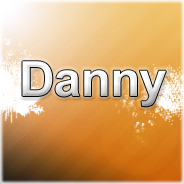
<style>
.page{position:relative;width:184px;height:184px}
.page>*{position:absolute;margin:0}
.t1{font:48.5px "Arial-BoldMT";letter-spacing:-0.01em;color:#ececec}
</style>
<div class="page">
<p class="t1" style="left:22px;top:61px;width:144px;height:46px">Danny</p>
</div>
